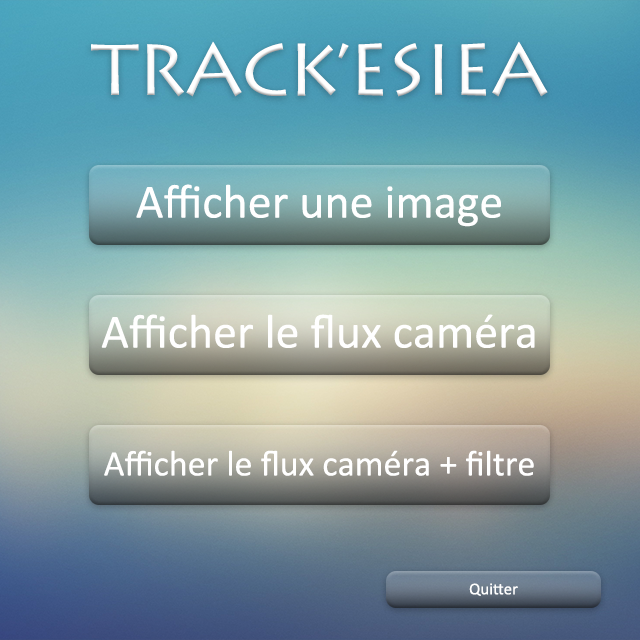
<style>
.page{position:relative;width:640px;height:640px}
.page>*{position:absolute;margin:0}
.t1{font:72px "LithosPro-Regular";letter-spacing:-0.02em;color:#ffffff}
.t2{font:48px "Calibri";color:#ffffff}
.t3{font:36px "Calibri";color:#ffffff}
.t4{font:16.6px "Calibri";color:#ffffff}
</style>
<div class="page">
<p class="t1" style="left:91px;top:41px;width:457px;height:56px">TRACK’ESIEA</p>
<p class="t2" style="left:136px;top:184px;width:365px;height:43px">Afficher une image</p>
<p class="t2" style="left:101px;top:314px;width:434px;height:34px">Afficher le flux caméra</p>
<p class="t3" style="left:104px;top:450px;width:430px;height:26px">Afficher le flux caméra + filtre</p>
<p class="t4" style="left:469px;top:583px;width:49px;height:13px">Quitter</p>
</div>
